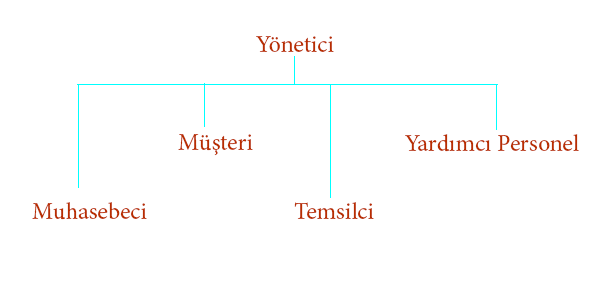
<style>
.page{position:relative;width:595px;height:283px;background:#ffffff}
.page>*{position:absolute;margin:0}
.t1{font:24px "MinionPro-Regular";color:#b92e00}
</style>
<div class="page">
<p class="t1" style="left:256px;top:36px;width:78px;height:16px">Yönetici</p>
<p class="t1" style="left:178px;top:134px;width:75px;height:22px">Müşteri</p>
<p class="t1" style="left:405px;top:134px;width:174px;height:18px">Yardımcı Personel</p>
<p class="t1" style="left:32px;top:202px;width:115px;height:18px">Muhasebeci</p>
<p class="t1" style="left:294px;top:202px;width:80px;height:17px">Temsilci</p>
</div>
